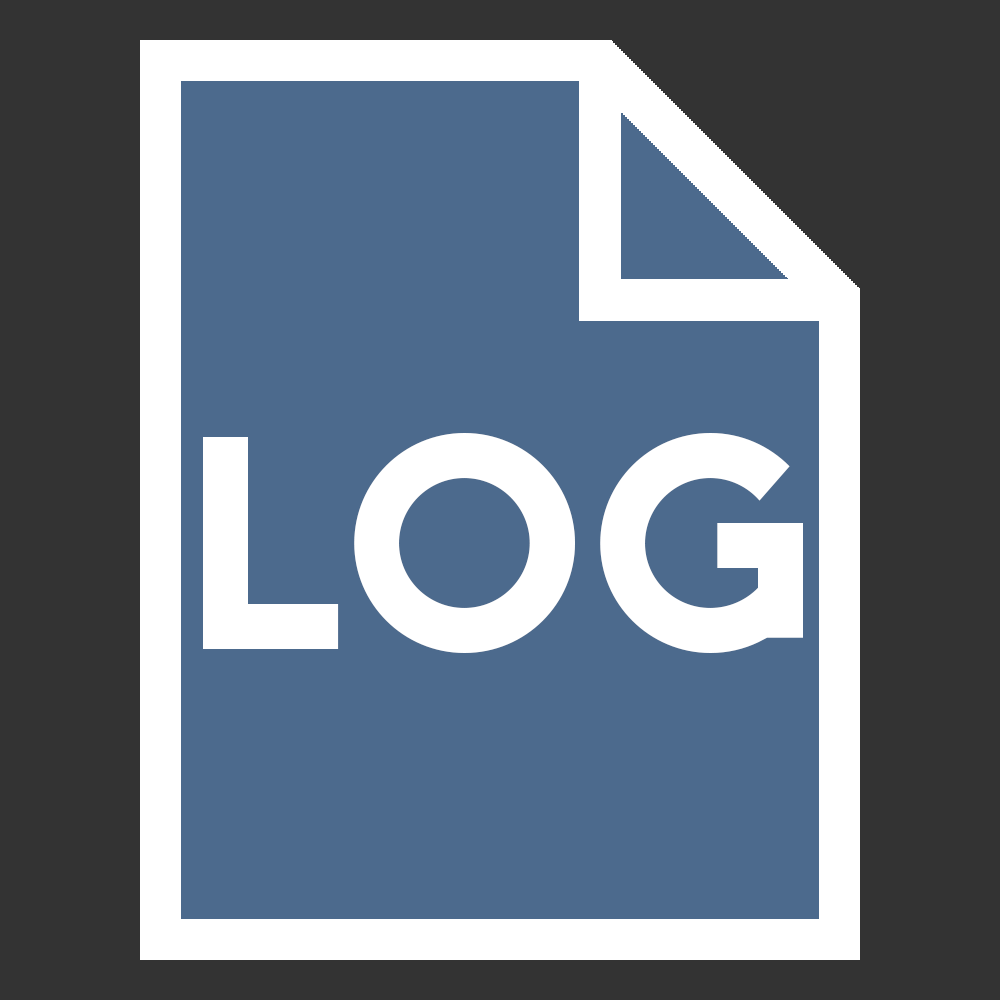
<style>
.page{position:relative;width:1000px;height:1000px;background:#4c6a8d}
.page>*{position:absolute;margin:0}
.t1{font:300.1px "Arya-Single";color:#ffffff}
</style>
<div class="page">
<p class="t1" style="left:203px;top:433px;width:600px;height:220px">Log</p>
</div>
